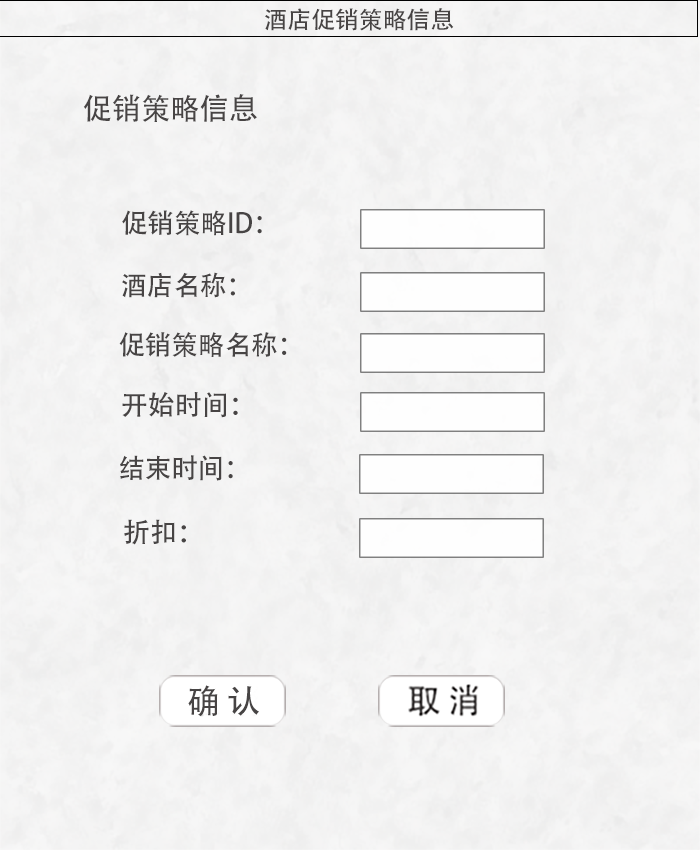
<style>
.page{position:relative;width:700px;height:850px}
.page>*{position:absolute;margin:0}
.t1{font:24px "AdobeHeitiStd-Regular";letter-spacing:-0.005em;color:#474444;text-transform:uppercase}
.t2{font:29.7px "AdobeHeitiStd-Regular";letter-spacing:-0.005em;color:#474444;text-transform:uppercase}
.t3{font:27px "AdobeHeitiStd-Regular";letter-spacing:-0.005em;color:#474444;text-transform:uppercase}
</style>
<div class="page">
<p class="t1" style="left:265px;top:8px;width:189px;height:23px">酒店促销策略信息</p>
<p class="t2" style="left:83px;top:94px;width:174px;height:28px">促销策略信息</p>
<p class="t3" style="left:122px;top:210px;width:140px;height:26px">促销策略ID：</p>
<p class="t3" style="left:122px;top:272px;width:113px;height:26px">酒店名称：</p>
<p class="t3" style="left:119px;top:332px;width:168px;height:25px">促销策略名称：</p>
<p class="t3" style="left:122px;top:392px;width:116px;height:26px">开始时间：</p>
<p class="t3" style="left:120px;top:455px;width:113px;height:26px">结束时间：</p>
<p class="t3" style="left:124px;top:519px;width:62px;height:26px">折扣：</p>
</div>
